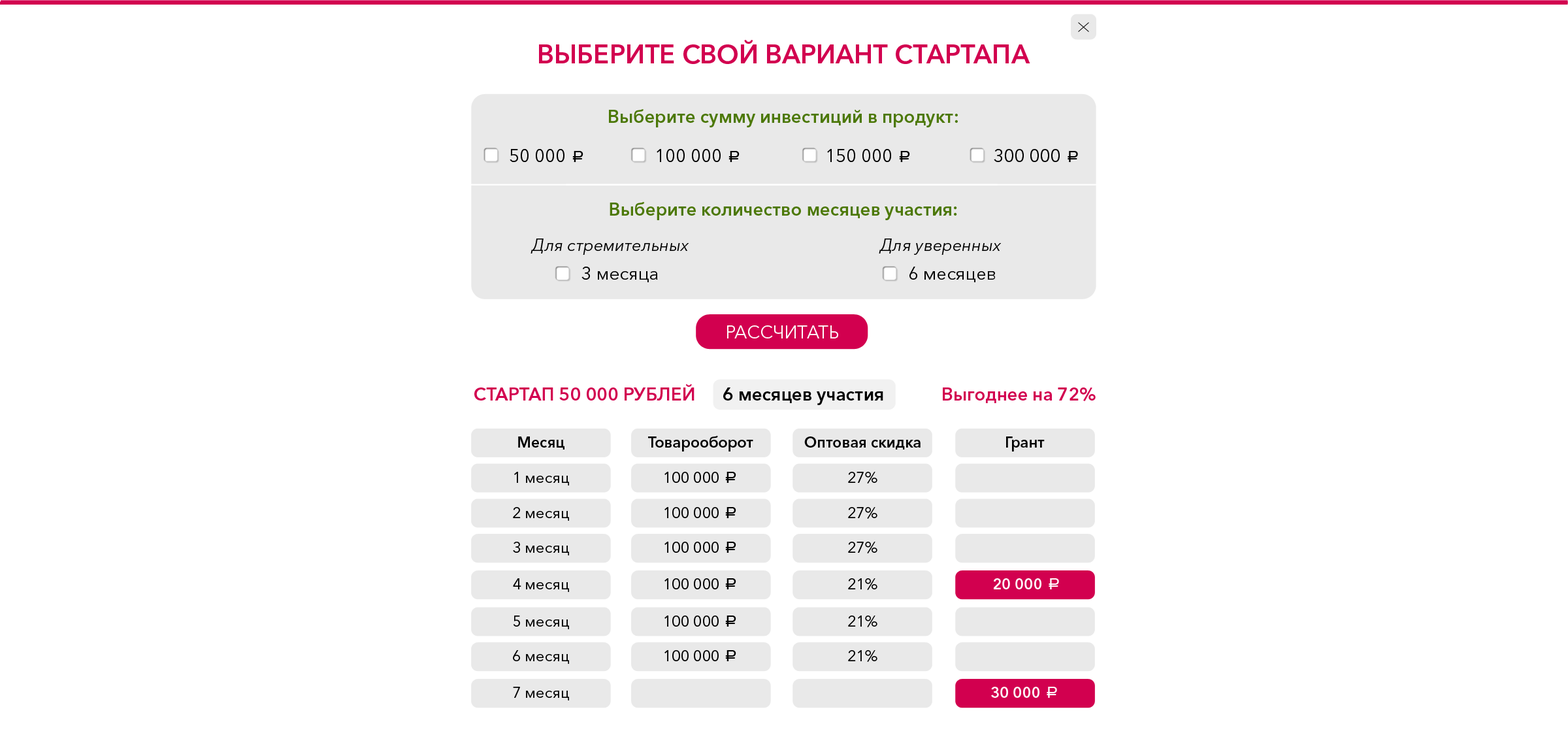
<style>
.page{position:relative;width:1568px;height:739px;background:#ffffff}
.page>*{position:absolute;margin:0}
.t1{font:26px "AvenirNextCyr-Demi";color:#d2004f;text-transform:uppercase}
.t2{font:18.1px "AvenirNextCyr-Demi";color:#4c7807}
.t3{font:18.1px "AvenirNextCyr-Regular";color:#000000}
.t4{font:16.6px "ALSRubl";color:#000000}
.t5{font:16.6px "AvenirNextCyr-Italic";color:#000000}
.t6{font:18.1px "AvenirNextCyr-Regular";color:#ffffff;text-transform:uppercase}
.t7{font:18.1px "AvenirNextCyr-Demi";color:#d2004f}
.t8{font:18.1px "AvenirNextCyr-Demi";color:#000000}
.t9{font:15.2px "AvenirNextCyr-Demi";color:#000000}
.t10{font:15.2px "AvenirNextCyr-Regular";color:#000000}
.t11{font:15.2px "AvenirNextCyr-Demi";color:#ffffff}
.t12{font:16.6px "ALSRubl";color:#ffffff}
</style>
<div class="page">
<p class="t1" style="left:539px;top:40px;width:491px;height:24px">Выберите свой вариант стартапа</p>
<p class="t2" style="left:609px;top:109px;width:349px;height:18px">Выберите сумму инвестиций в продукт:</p>
<p class="t3" style="left:510px;top:149px;width:73px;height:13px">50 000 <span class="t4">a</span></p>
<p class="t3" style="left:657px;top:149px;width:83px;height:13px">100 000 <span class="t4">a</span></p>
<p class="t3" style="left:827px;top:149px;width:83px;height:13px">150 000 <span class="t4">a</span></p>
<p class="t3" style="left:994px;top:149px;width:84px;height:13px">300 000 <span class="t4">a</span></p>
<p class="t2" style="left:610px;top:202px;width:347px;height:18px">Выберите количество месяцев участия:</p>
<p class="t5" style="left:531px;top:238px;width:158px;height:17px">Для стремительных</p>
<p class="t5" style="left:879px;top:238px;width:123px;height:17px">Для уверенных</p>
<p class="t3" style="left:581px;top:267px;width:77px;height:15px">3 месяца</p>
<p class="t3" style="left:909px;top:267px;width:86px;height:15px">6 месяцев</p>
<p class="t6" style="left:727px;top:325px;width:111px;height:13px">Рассчитать</p>
<p class="t7" style="left:474px;top:384px;width:409px;height:21px">СТАРТАП 50 000 РУБЛЕЙ <span class="t8">     6 месяцев участия</span></p>
<p class="t7" style="left:943px;top:387px;width:153px;height:16px">Выгоднее на 72%</p>
<p class="t9" style="left:518px;top:436px;width:46px;height:13px">Месяц</p>
<p class="t9" style="left:648px;top:436px;width:105px;height:15px">Товарооборот</p>
<p class="t9" style="left:804px;top:436px;width:117px;height:13px">Оптовая скидка</p>
<p class="t9" style="left:1006px;top:436px;width:39px;height:15px">Грант</p>
<p class="t10" style="left:514px;top:472px;width:55px;height:13px">1 месяц</p>
<p class="t10" style="left:664px;top:472px;width:72px;height:11px">100 000 <span class="t4">a</span></p>
<p class="t10" style="left:848px;top:472px;width:29px;height:11px">27%</p>
<p class="t10" style="left:513px;top:507px;width:56px;height:14px">2 месяц</p>
<p class="t10" style="left:664px;top:507px;width:72px;height:11px">100 000 <span class="t4">a</span></p>
<p class="t10" style="left:848px;top:507px;width:29px;height:12px">27%</p>
<p class="t10" style="left:513px;top:542px;width:56px;height:13px">3 месяц</p>
<p class="t10" style="left:664px;top:542px;width:72px;height:11px">100 000 <span class="t4">a</span></p>
<p class="t10" style="left:848px;top:542px;width:29px;height:11px">27%</p>
<p class="t10" style="left:513px;top:578px;width:56px;height:14px">4 месяц</p>
<p class="t10" style="left:664px;top:578px;width:72px;height:11px">100 000 <span class="t4">a</span></p>
<p class="t10" style="left:848px;top:578px;width:29px;height:12px">21%</p>
<p class="t11" style="left:994px;top:578px;width:65px;height:11px">20 000 <span class="t12">a</span></p>
<p class="t10" style="left:513px;top:615px;width:56px;height:14px">5 месяц</p>
<p class="t10" style="left:664px;top:615px;width:72px;height:12px">100 000 <span class="t4">a</span></p>
<p class="t10" style="left:848px;top:615px;width:29px;height:12px">21%</p>
<p class="t10" style="left:513px;top:650px;width:56px;height:14px">6 месяц</p>
<p class="t10" style="left:664px;top:650px;width:72px;height:11px">100 000 <span class="t4">a</span></p>
<p class="t10" style="left:848px;top:650px;width:29px;height:12px">21%</p>
<p class="t10" style="left:513px;top:687px;width:56px;height:13px">7 месяц</p>
<p class="t11" style="left:991px;top:687px;width:66px;height:11px">30 000 <span class="t12">a</span></p>
</div>
